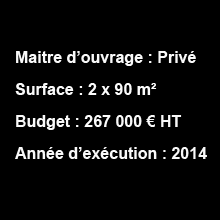
<style>
.page{position:relative;width:220px;height:220px;background:#000000}
.page>*{position:absolute;margin:0}
.t1{font:16px/32px "Arial-BoldMT";color:#f9f9f9}
.t2{font:16px/32px "Arial-BoldMT";color:#fcfcfc}
</style>
<div class="page">
<p class="t1" style="left:15px;top:51px;width:192px;height:108px">Maitre d’ouvrage : Privé<br>Surface : <span class="t2">2 x 90 m²<br></span>Budget : <span class="t2">267 </span>000 € HT<br>Année d’exécution : 2014</p>
</div>
